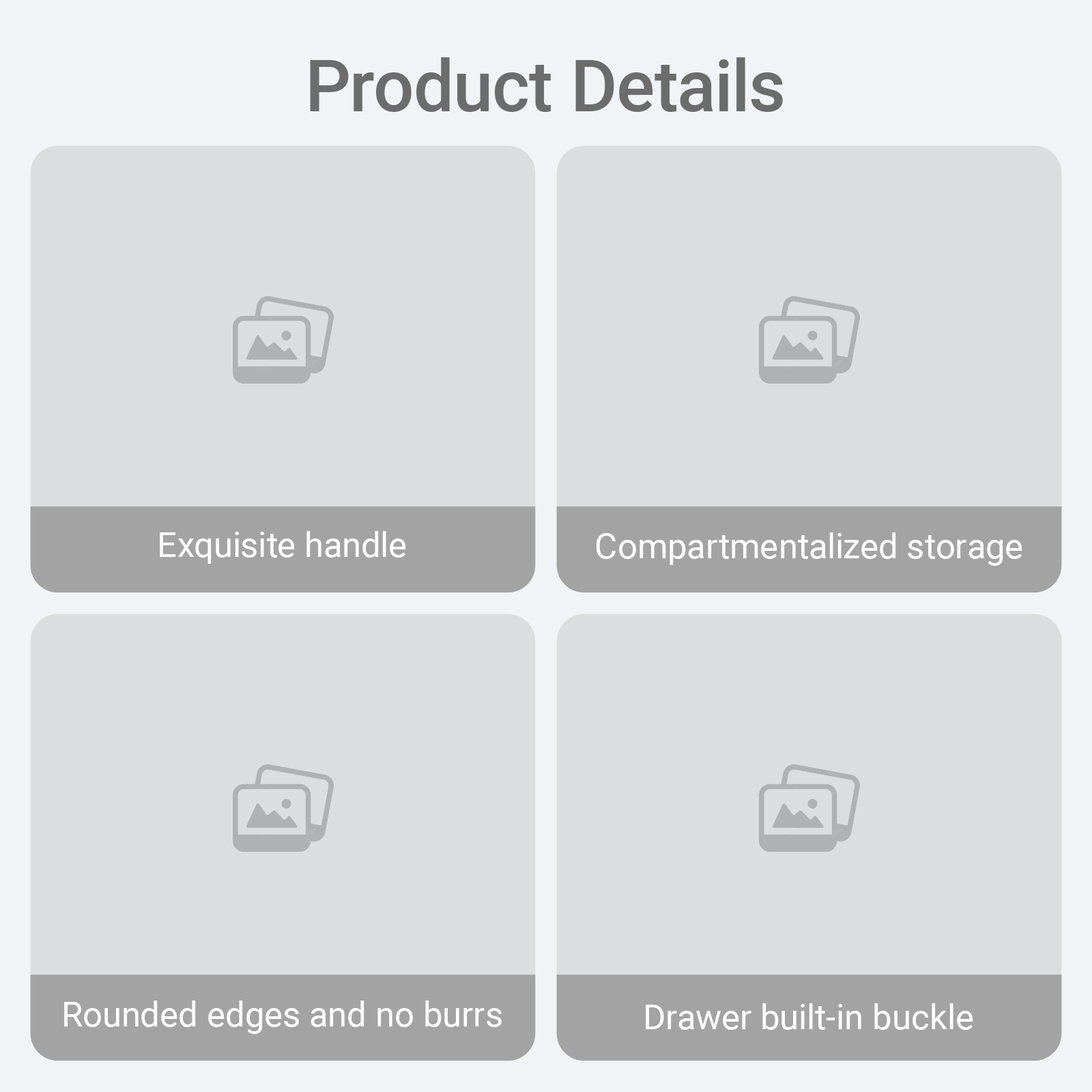
<style>
.page{position:relative;width:1092px;height:1092px;background:#dcdddf}
.page>*{position:absolute;margin:0}
.t1{font:71.3px "Roboto-Medium";color:#6c6c6c}
.t2{font:34.9px "Roboto-Regular";color:#ffffff}
</style>
<div class="page">
<p class="t1" style="left:310px;top:57px;width:473px;height:55px">Product Details</p>
<p class="t2" style="left:160px;top:531px;width:246px;height:33px">Exquisite handle</p>
<p class="t2" style="left:596px;top:532px;width:426px;height:34px">Compartmentalized storage</p>
<p class="t2" style="left:64px;top:1001px;width:438px;height:33px">Rounded edges and no burrs</p>
<p class="t2" style="left:646px;top:1003px;width:327px;height:27px">Drawer built-in buckle</p>
</div>
